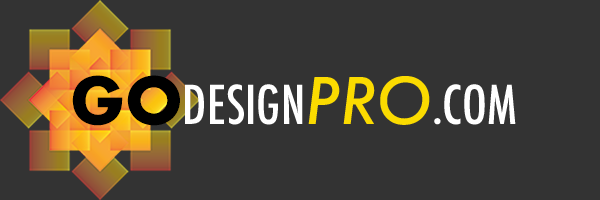
<style>
.page{position:relative;width:600px;height:200px;background:#333333}
.page>*{position:absolute;margin:0}
.t1{font:52.1px "Futura-CondensedMedium";color:#ffffff}
.t2{font:62.5px "Futura-Bold";color:#000000}
.t3{font:62.5px "Futura-MediumItalic";color:#fbdb00}
</style>
<div class="page">
<p class="t1" style="left:72px;top:75px;width:444px;height:51px"><span class="t2">GO</span>DESIGN<span class="t3">PRO</span>.COM</p>
</div>
